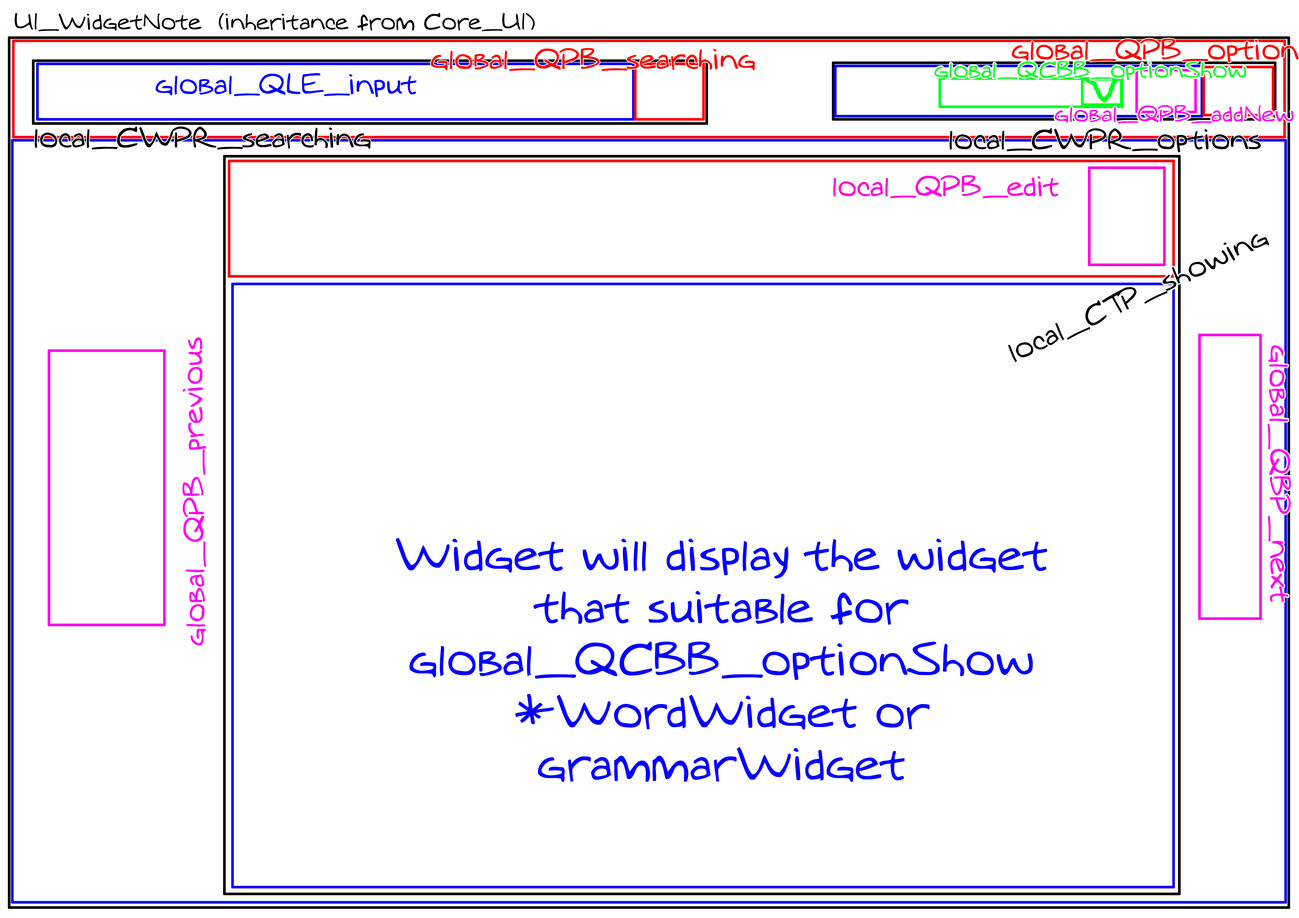
<style>
.page{position:relative;width:1299px;height:918px;background:#ffffff}
.page>*{position:absolute;margin:0}
.t1{font:21.8px "MTOaugie-Regular";color:#000000}
.t2{font:27.3px "MTOaugie-Regular";color:#ff0000}
.t3{font:21.8px "MTOaugie-Regular";color:#00ff24}
.t4{font:27.3px "MTOaugie-Regular";color:#0600ff}
.t5{font:21.8px "MTOaugie-Regular";color:#ff00ea}
.t6{font:27.3px "MTOaugie-Regular";color:#000000}
.t7{font:27.3px "MTOaugie-Regular";color:#ff00d8}
.t8{font:27.3px "MTOaugie-Regular";color:#ff00f0}
.t9{font:43.6px "MTOaugie-Regular";color:#0600ff}
</style>
<div class="page">
<p class="t1" style="left:15px;top:13px;width:520px;height:18px">UI_WidgetNote  (inheritance from Core_UI)</p>
<p class="t2" style="left:1011px;top:38px;width:287px;height:25px">global_QPB_option</p>
<p class="t2" style="left:431px;top:48px;width:324px;height:23px">global_QPB_searching</p>
<p class="t3" style="left:934px;top:61px;width:312px;height:19px">global_QCBB_optionShow</p>
<p class="t4" style="left:155px;top:73px;width:261px;height:24px">global_QLE_input</p>
<p class="t5" style="left:1054px;top:105px;width:239px;height:19px">global_QPB_addNew</p>
<p class="t6" style="left:35px;top:126px;width:336px;height:24px">local_CWPR_searching</p>
<p class="t6" style="left:949px;top:128px;width:311px;height:24px">local_CWPR_options</p>
<p class="t7" style="left:833px;top:175px;width:225px;height:23px">local_QPB_edit</p>
<p class="t6" style="left:1008px;top:234px;width:261px;height:129px;rotate:-25deg">local_CTP_showing</p>
<p class="t8" style="left:182px;top:337px;width:24px;height:309px;rotate:-90deg">global_QPB_previous</p>
<p class="t8" style="left:1267px;top:345px;width:23px;height:257px;rotate:90deg">global_QBP_next</p>
<p class="t9" style="left:396px;top:538px;width:651px;height:244px;text-align:center">Widget will display the widget that suitable for <br>global_QCBB_optionShow<br>*WordWidget or <br>grammarWidget</p>
</div>
